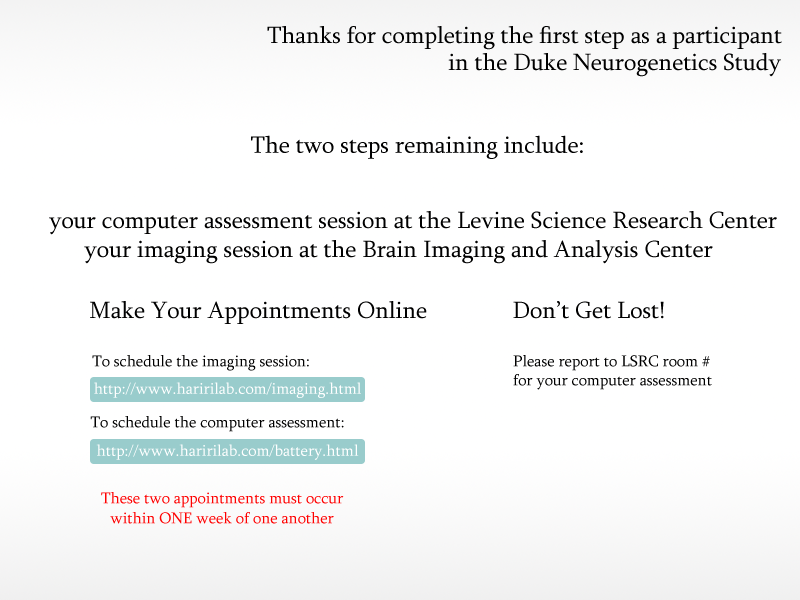
<style>
.page{position:relative;width:800px;height:600px;background:#ffffff}
.page>*{position:absolute;margin:0}
.t1{font:24px "Sylfaen";color:#000000}
.t2{font:16px "Sylfaen";color:#000000}
.t3{font:16px "Sylfaen";color:#ffffff}
.t4{font:16px "Sylfaen";color:#ff0000}
</style>
<div class="page">
<p class="t1" style="left:267px;top:26px;width:515px;height:24px">Thanks for completing the first step as a participant</p>
<p class="t1" style="left:448px;top:53px;width:333px;height:24px">in the Duke Neurogenetics Study</p>
<p class="t1" style="left:251px;top:135px;width:332px;height:24px">The two steps remaining include:</p>
<p class="t1" style="left:49px;top:211px;width:728px;height:24px">your computer assessment session at the Levine Science Research Center</p>
<p class="t1" style="left:84px;top:240px;width:629px;height:24px">your imaging session at the Brain Imaging and Analysis Center</p>
<p class="t1" style="left:90px;top:301px;width:337px;height:23px">Make Your Appointments Online</p>
<p class="t1" style="left:513px;top:301px;width:151px;height:18px">Don’t Get Lost!</p>
<p class="t2" style="left:92px;top:355px;width:217px;height:16px">To schedule the imaging session:</p>
<p class="t2" style="left:513px;top:355px;width:197px;height:16px">Please report to LSRC room #</p>
<p class="t2" style="left:513px;top:374px;width:199px;height:16px">for your computer assessment</p>
<p class="t3" style="left:94px;top:382px;width:267px;height:16px">http://www.haririlab.com/imaging.html</p>
<p class="t2" style="left:90px;top:416px;width:254px;height:16px">To schedule the computer assessment:</p>
<p class="t3" style="left:96px;top:444px;width:263px;height:16px">http://www.haririlab.com/battery.html</p>
<p class="t4" style="left:101px;top:492px;width:243px;height:16px">These two appointments must occur</p>
<p class="t4" style="left:110px;top:512px;width:224px;height:12px">within ONE week of one another</p>
</div>
